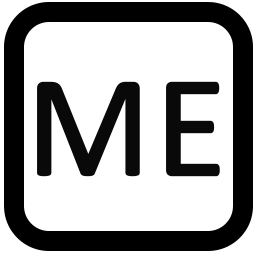
<style>
.page{position:relative;width:256px;height:256px;background:#ffffff}
.page>*{position:absolute;margin:0}
.t1{font:145.8px "Calibri";color:#090909;font-weight:bold}
</style>
<div class="page">
<p class="t1" style="left:37px;top:81px;width:183px;height:96px">ME</p>
</div>
